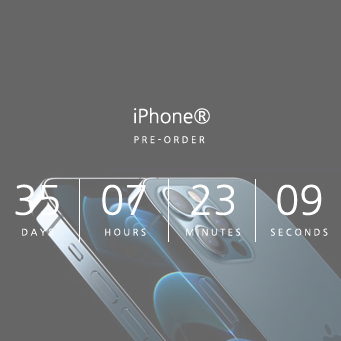
<style>
.page{position:relative;width:341px;height:341px;background:#666666}
.page>*{position:absolute;margin:0}
.t1{font:19px "NanumGothic";color:#ffffff}
.t2{font:9px "NanumGothic";letter-spacing:0.3em;color:#ffffff}
.t3{font:40px "NanumGothic";color:#ffffff}
</style>
<div class="page">
<p class="t1" style="left:134px;top:107px;width:76px;height:17px">iPhone®</p>
<p class="t2" style="left:134px;top:136px;width:71px;height:8px">PRE-ORDER</p>
<p class="t3" style="left:15px;top:184px;width:44px;height:32px">35</p>
<p class="t3" style="left:102px;top:184px;width:44px;height:32px">07</p>
<p class="t3" style="left:191px;top:184px;width:43px;height:32px">23</p>
<p class="t3" style="left:277px;top:184px;width:45px;height:32px">09</p>
<p class="t2" style="left:22px;top:228px;width:32px;height:8px">DAYS</p>
<p class="t2" style="left:105px;top:228px;width:41px;height:8px">HOURS</p>
<p class="t2" style="left:186px;top:228px;width:55px;height:8px">MINUTES</p>
<p class="t2" style="left:271px;top:228px;width:57px;height:8px">SECONDS</p>
</div>
